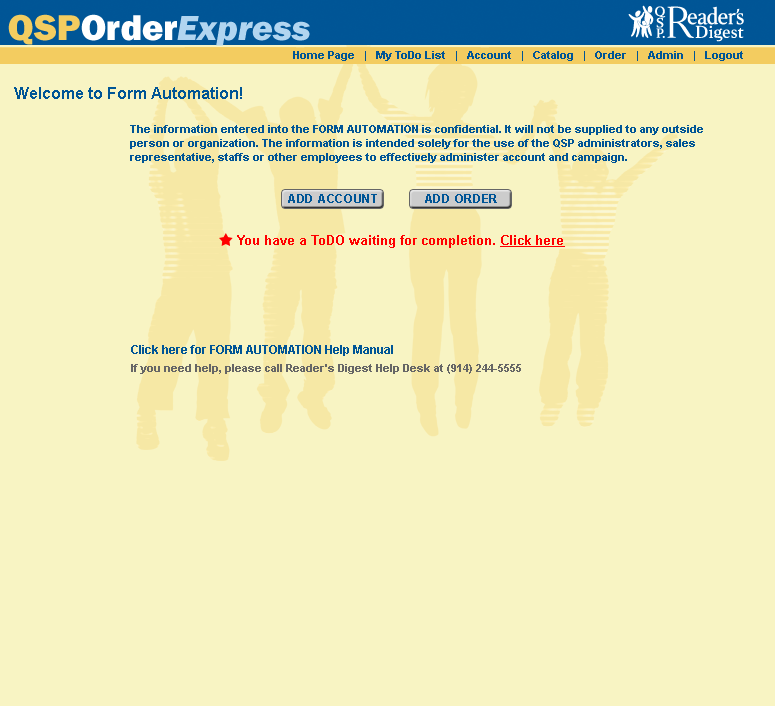
<style>
.page{position:relative;width:775px;height:706px;background:#f8f4c3}
.page>*{position:absolute;margin:0}
.t1{font:36px "FranklinGothic-HeavyItal";color:#b1d5f0}
.t2{font:36px "FranklinGothic-Heavy";color:#f3cc60}
.t3{font:36px "FranklinGothic-Heavy";color:#ffffff}
.t4{font:11px "Arial-BoldMT";color:#005596}
.t5{font:16px "Arial-BoldMT";color:#005596}
.t6{font:11px/14px "Arial-BoldMT";color:#005596}
.t7{font:12px "Arial-BoldMT";letter-spacing:0.06em;color:#005596}
.t8{font:13px "Arial-BoldMT";color:#ff0000}
.t9{font:13px "Arial-BoldMT";color:#ff0000;text-decoration:underline}
.t10{font:11px/9px "Arial-BoldMT";color:#666666}
.t11{font:12px/9px "Arial-BoldMT";color:#005596}
</style>
<div class="page">
<p class="t1" style="left:8px;top:14px;width:302px;height:32px"><span class="t2">QSP</span><span class="t3">Order</span>Express</p>
<p class="t4" style="left:293px;top:51px;width:450px;height:10px">Home Page   |   My ToDo List   |   Account   |   Catalog   |   Order   |   Admin   |   Logout</p>
<p class="t5" style="left:14px;top:87px;width:228px;height:12px">Welcome to Form Automation!</p>
<p class="t6" style="left:130px;top:125px;width:573px;height:38px">The information entered into the FORM AUTOMATION is confidential. It will not be supplied to any outside <br>person or organization. The information is intended solely for the use of the QSP administrators, sales <br>representative, staffs or other employees to effectively administer account and campaign.</p>
<p class="t7" style="left:288px;top:194px;width:89px;height:9px">ADD ACCOUNT</p>
<p class="t7" style="left:425px;top:194px;width:72px;height:9px">ADD ORDER</p>
<p class="t8" style="left:237px;top:235px;width:328px;height:13px">You have a ToDO waiting for completion. <span class="t9">Click here</span></p>
<p class="t10" style="left:131px;top:345px;width:390px;height:29px"><span class="t11">Click here for FORM AUTOMATION Help Manual<br><br></span>If you need help, please call Reader's Digest Help Desk at (914) 244-5555</p>
</div>
